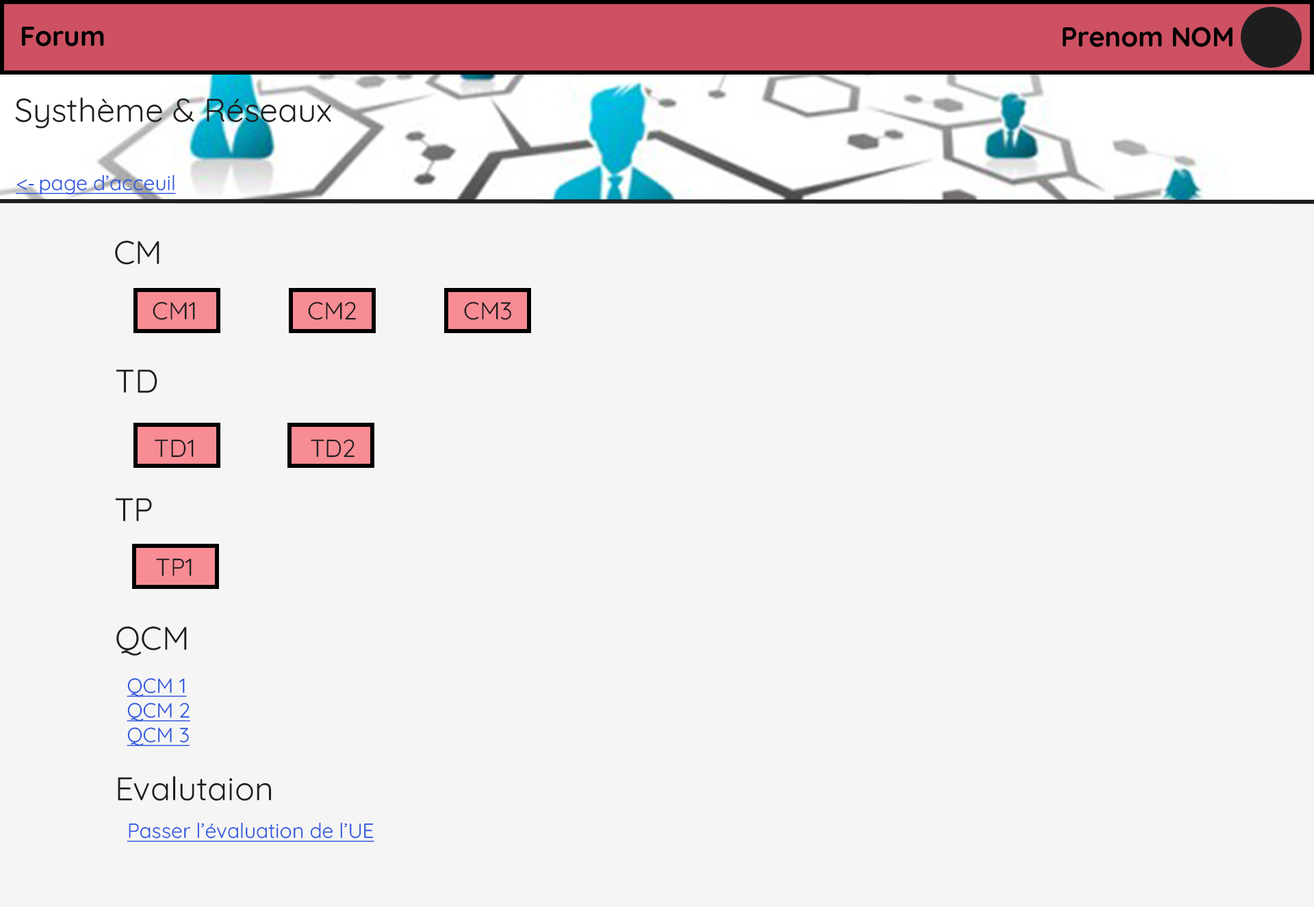
<style>
.page{position:relative;width:1314px;height:907px;background:#f5f5f5}
.page>*{position:absolute;margin:0}
.t1{font:32.9px "Quicksand-Regular";color:#1f1e1f}
.t2{font:20.5px "Quicksand-Regular";color:#2c56de;text-decoration:underline}
.t3{font:20.5px "MyriadPro-Regular";color:#2c56de;text-decoration:underline}
.t4{font:24.6px "Quicksand-Regular";color:#1f1e1f}
</style>
<div class="page">
<p class="t1" style="left:15px;top:97px;width:316px;height:32px">Systhème &amp; Réseaux</p>
<p class="t2" style="left:16px;top:175px;width:160px;height:20px"><span class="t3">&lt;- </span>page d’acceuil</p>
<p class="t1" style="left:115px;top:240px;width:44px;height:25px">CM</p>
<p class="t4" style="left:153px;top:302px;width:42px;height:18px">CM1</p>
<p class="t4" style="left:308px;top:302px;width:48px;height:18px">CM2</p>
<p class="t4" style="left:464px;top:302px;width:47px;height:18px">CM3</p>
<p class="t1" style="left:116px;top:370px;width:41px;height:24px">TD</p>
<p class="t4" style="left:155px;top:439px;width:39px;height:19px">TD1</p>
<p class="t4" style="left:311px;top:439px;width:44px;height:19px">TD2</p>
<p class="t1" style="left:115px;top:498px;width:37px;height:24px">TP</p>
<p class="t4" style="left:156px;top:558px;width:36px;height:19px">TP1</p>
<p class="t1" style="left:116px;top:626px;width:71px;height:30px">QCM</p>
<p class="t2" style="left:127px;top:678px;width:63px;height:69px">QCM 1<br>QCM 2<br>QCM 3</p>
<p class="t1" style="left:118px;top:776px;width:154px;height:25px">Evalutaion</p>
<p class="t2" style="left:127px;top:823px;width:247px;height:19px">Passer l’évaluation de l’UE</p>
</div>
